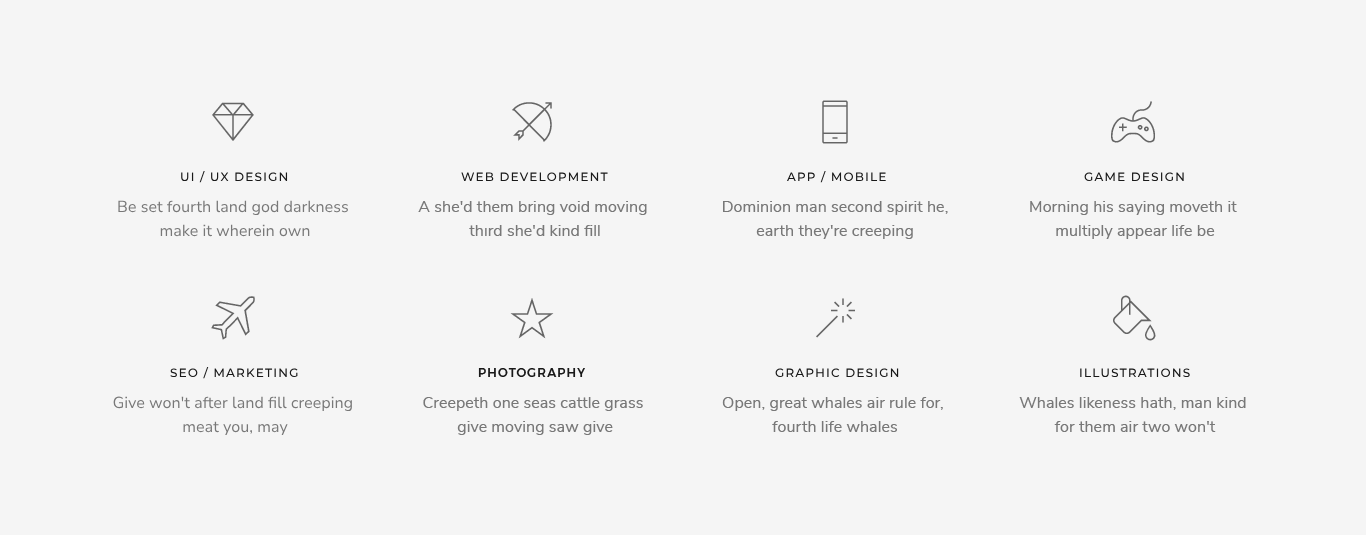
<style>
.page{position:relative;width:1366px;height:535px;background:#f5f5f5}
.page>*{position:absolute;margin:0}
.t1{font:12px "Montserrat-Medium";letter-spacing:0.1em;color:#191919;text-transform:uppercase}
.t2{font:16px/24px "NunitoSans-Regular";letter-spacing:0.005em;color:#787878}
</style>
<div class="page">
<p class="t1" style="left:181px;top:170px;width:107px;height:13px">ui / ux design</p>
<p class="t1" style="left:461px;top:172px;width:147px;height:10px">web development</p>
<p class="t1" style="left:786px;top:170px;width:100px;height:13px">app / mobile</p>
<p class="t1" style="left:1084px;top:172px;width:100px;height:10px">game design</p>
<p class="t2" style="left:118px;top:200px;width:230px;height:37px;text-align:center">Be set fourth land god darkness <br>make it wherein own</p>
<p class="t2" style="left:418px;top:201px;width:229px;height:35px;text-align:center">A she'd them bring void moving <br>third she'd kind fill</p>
<p class="t2" style="left:723px;top:201px;width:225px;height:38px;text-align:center">Dominion man second spirit he,<br>earth they're creeping</p>
<p class="t2" style="left:1030px;top:201px;width:207px;height:38px;text-align:center">Morning his saying moveth it <br>multiply appear life be</p>
<p class="t1" style="left:170px;top:366px;width:128px;height:13px">SEO / marketing</p>
<p class="t1" style="left:478px;top:368px;width:107px;height:9px">photography</p>
<p class="t1" style="left:775px;top:368px;width:124px;height:10px">graphic design</p>
<p class="t1" style="left:1080px;top:368px;width:110px;height:10px">illustrations</p>
<p class="t2" style="left:113px;top:396px;width:239px;height:39px;text-align:center">Give won't after land fill creeping <br>meat you, may</p>
<p class="t2" style="left:423px;top:397px;width:220px;height:38px;text-align:center">Creepeth one seas cattle grass <br>give moving saw give</p>
<p class="t2" style="left:722px;top:397px;width:221px;height:35px;text-align:center">Open, great whales air rule for, <br>fourth life whales</p>
<p class="t2" style="left:1019px;top:397px;width:227px;height:35px;text-align:center">Whales likeness hath, man kind <br>for them air two won't</p>
</div>
